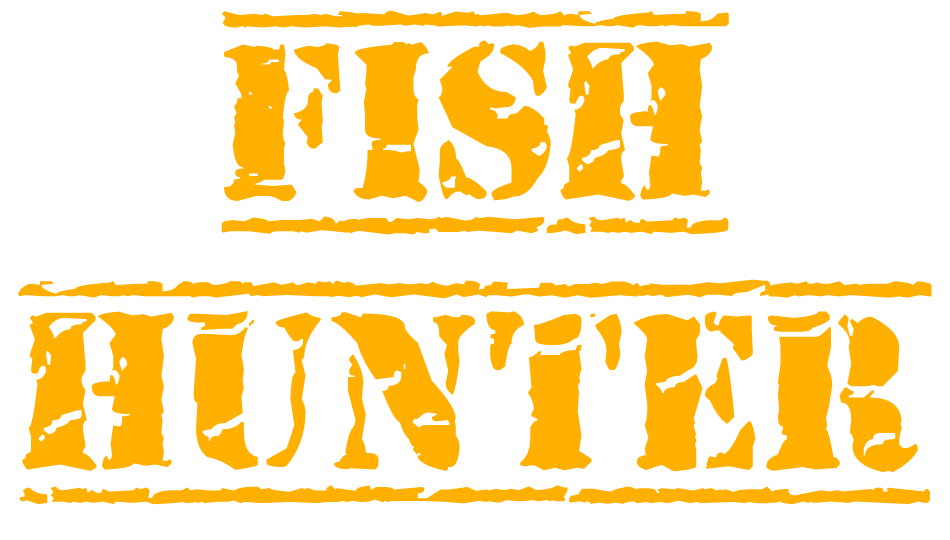
<style>
.page{position:relative;width:950px;height:540px;background:#ffffff}
.page>*{position:absolute;margin:0}
.t1{font:225px "OldStamper";color:#ffb000}
</style>
<div class="page">
<p class="t1" style="left:18px;top:10px;width:914px;height:495px;text-align:center">FISH<br>HUNTER</p>
</div>
